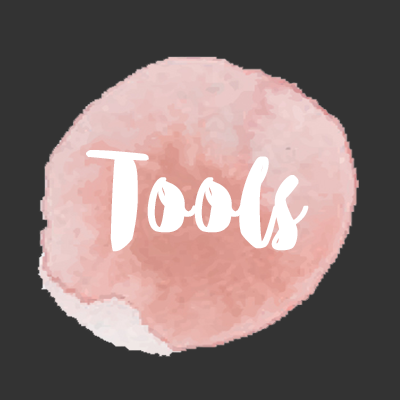
<style>
.page{position:relative;width:400px;height:400px;background:#333333}
.page>*{position:absolute;margin:0}
.t1{font:100px "Stonestickfreetester";color:#ffffff;font-weight:bold}
</style>
<div class="page">
<p class="t1" style="left:86px;top:150px;width:223px;height:102px">Tools</p>
</div>
